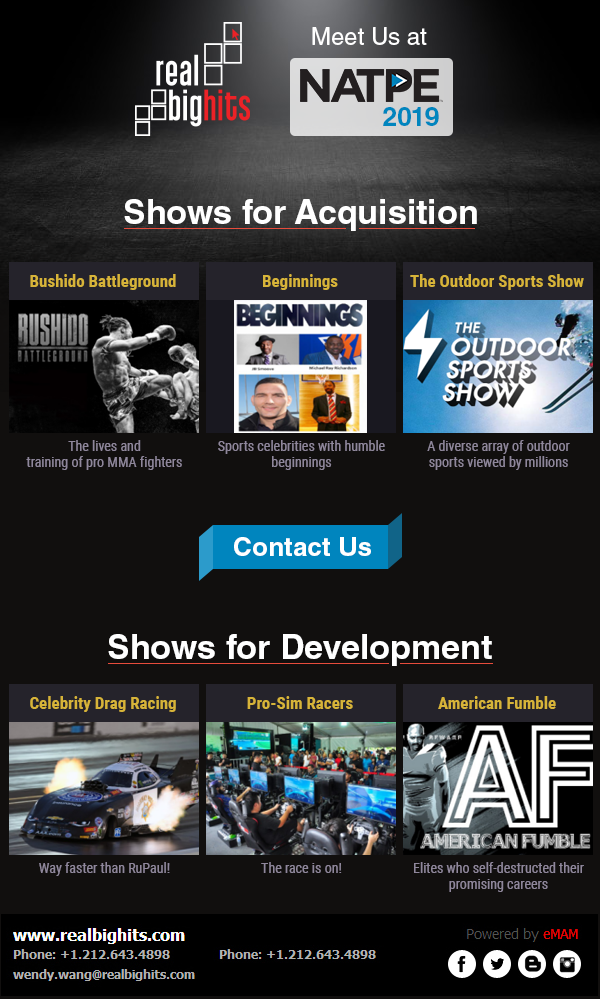
<style>
.page{position:relative;width:600px;height:999px;background:#110f0e}
.page>*{position:absolute;margin:0}
.t1{font:24px "HelveticaLTStd-Roman";color:#ffffff}
.t2{font:26.8px "HelveticaLTStd-Bold";color:#0085be}
.t3{font:34px "HelveticaLTStd-Bold";color:#ffffff}
.t4{font:17px "RobotoCondensed-Bold";color:#d7b439}
.t5{font:14px "RobotoCondensed-Regular";color:#8f879b}
.t6{font:26.3px "HelveticaLTStd-Bold";color:#ffffff}
</style>
<div class="page">
<p class="t1" style="left:312px;top:27px;width:115px;height:18px">Meet Us at</p>
<p class="t2" style="left:383px;top:107px;width:56px;height:19px">2019</p>
<p class="t3" style="left:124px;top:199px;width:353px;height:32px">Shows for Acquisition</p>
<p class="t4" style="left:30px;top:274px;width:146px;height:16px">Bushido Battleground</p>
<p class="t4" style="left:263px;top:274px;width:75px;height:16px">Beginnings</p>
<p class="t4" style="left:410px;top:274px;width:174px;height:16px">The Outdoor Sports Show</p>
<p class="t5" style="left:26px;top:440px;width:156px;height:30px;text-align:center">The lives and<br>training of pro MMA fighters</p>
<p class="t5" style="left:218px;top:440px;width:167px;height:30px;text-align:center">Sports celebrities with humble beginnings</p>
<p class="t5" style="left:427px;top:440px;width:143px;height:30px;text-align:center">A diverse array of outdoor sports viewed by millions worldwide</p>
<p class="t6" style="left:234px;top:537px;width:137px;height:19px">Contact Us</p>
<p class="t3" style="left:108px;top:634px;width:384px;height:32px">Shows for Development</p>
<p class="t4" style="left:30px;top:696px;width:146px;height:16px">Celebrity Drag Racing</p>
<p class="t4" style="left:247px;top:696px;width:106px;height:13px">Pro-Sim Racers</p>
<p class="t4" style="left:438px;top:696px;width:118px;height:13px">American Fumble</p>
<p class="t5" style="left:39px;top:862px;width:131px;height:14px">Way faster than RuPaul!</p>
<p class="t5" style="left:261px;top:862px;width:81px;height:11px">The race is on!</p>
<p class="t5" style="left:414px;top:862px;width:170px;height:30px;text-align:center">Elites who self-destructed their promising careers</p>
</div>
